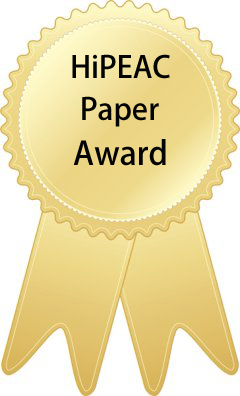
<style>
.page{position:relative;width:240px;height:396px}
.page>*{position:absolute;margin:0}
.t1{font:30px "AdobeHeitiStd-Regular";color:#040404}
.t2{font:32px "AdobeHeitiStd-Regular";color:#040404}
</style>
<div class="page">
<p class="t1" style="left:72px;top:54px;width:98px;height:25px">HiPEAC</p>
<p class="t1" style="left:82px;top:96px;width:77px;height:31px">Paper</p>
<p class="t2" style="left:73px;top:139px;width:93px;height:27px">Award</p>
</div>
